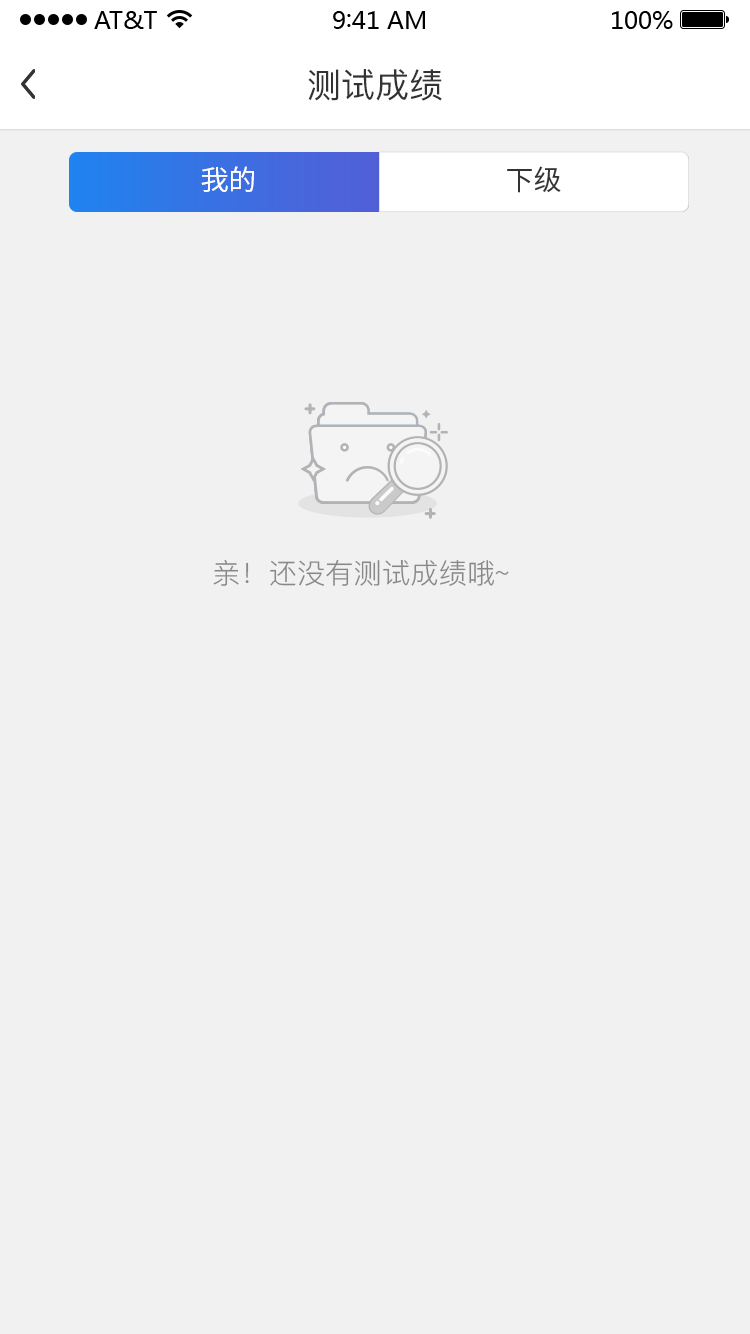
<style>
.page{position:relative;width:750px;height:1334px;background:#f1f1f1}
.page>*{position:absolute;margin:0}
.t1{font:34px "PingFang-SC-Medium";color:#333333}
.t2{font:28px "SourceHanSansCN-Regular";color:#ffffff}
.t3{font:28px "SourceHanSansCN-Regular";color:#333333}
.t4{font:28px "PingFang-SC-Regular";color:#888888}
</style>
<div class="page">
<p class="t1" style="left:308px;top:69px;width:134px;height:32px">测试成绩</p>
<p class="t2" style="left:201px;top:166px;width:53px;height:26px">我的</p>
<p class="t3" style="left:507px;top:166px;width:54px;height:27px">下级</p>
<p class="t4" style="left:213px;top:559px;width:296px;height:27px">亲！还没有测试成绩哦~</p>
</div>
